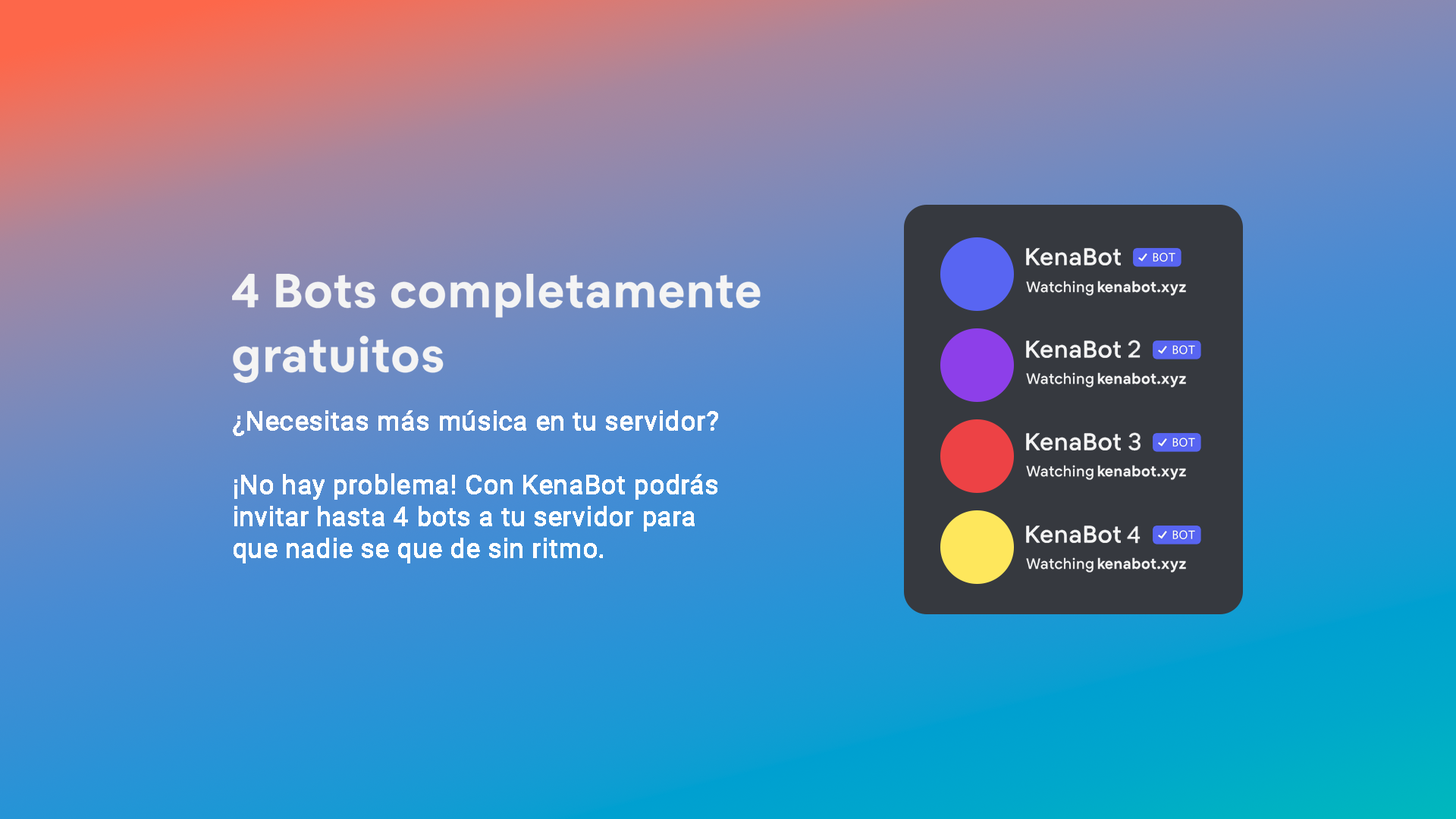
<style>
.page{position:relative;width:1456px;height:819px}
.page>*{position:absolute;margin:0}
.t1{font:26.5px "Roboto-Regular";color:#ffffff;font-weight:bold}
</style>
<div class="page">
<p class="t1" style="left:233px;top:410px;width:485px;height:153px">¿Necesitas más música en tu servidor?<br><br>¡No hay problema! Con KenaBot podrás<br>invitar hasta 4 bots a tu servidor para<br>que nadie se que de sin ritmo.</p>
</div>
